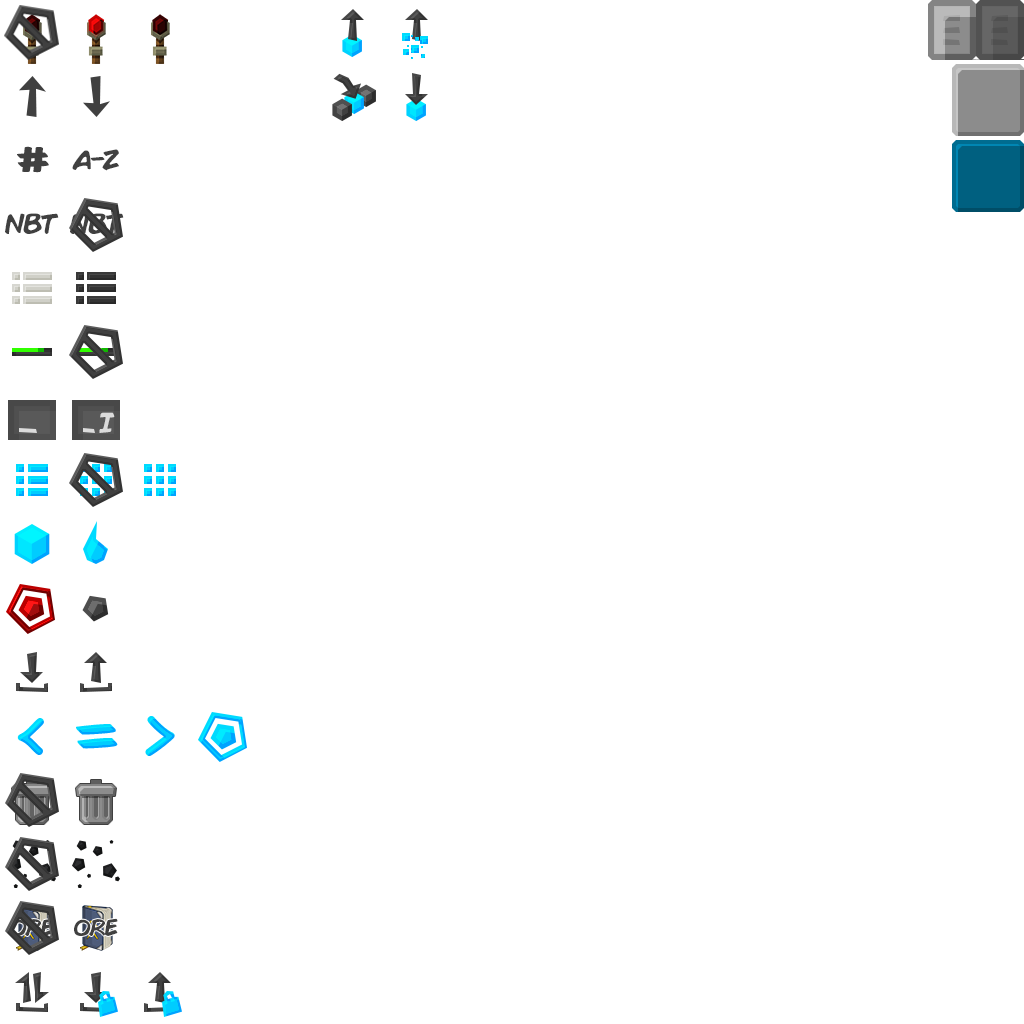
<style>
.page{position:relative;width:1024px;height:1024px;background:#ffffff}
.page>*{position:absolute;margin:0}
.t1{font:48px "ComicBook";color:#404040}
.t2{font:28px "ComicBook";letter-spacing:-0.08em;color:#404040}
.t3{font:28px "ComicBook";letter-spacing:-0.08em;color:#dbdbdb}
.t4{font:88px "ComicSansMS";letter-spacing:-0.08em}
.t5{font:80px "ComicBook";letter-spacing:-0.08em;color:#00ccff}
</style>
<div class="page">
<p class="t1" style="left:17px;top:146px;width:32px;height:27px">#</p>
<p class="t2" style="left:72px;top:149px;width:47px;height:22px">A-Z</p>
<p class="t2" style="left:5px;top:213px;width:54px;height:21px">NBT</p>
<p class="t2" style="left:70px;top:213px;width:54px;height:21px">NBT</p>
<p class="t3" style="left:99px;top:412px;width:16px;height:21px">I</p>
<p class="t4" style="left:17px;top:718px;width:27px;height:37px">&lt;</p>
<p class="t5" style="left:76px;top:724px;width:42px;height:25px">=</p>
<p class="t4" style="left:145px;top:716px;width:30px;height:40px">&gt;</p>
<p class="t2" style="left:10px;top:918px;width:44px;height:18px">ore</p>
<p class="t2" style="left:74px;top:918px;width:44px;height:18px">ore</p>
</div>
